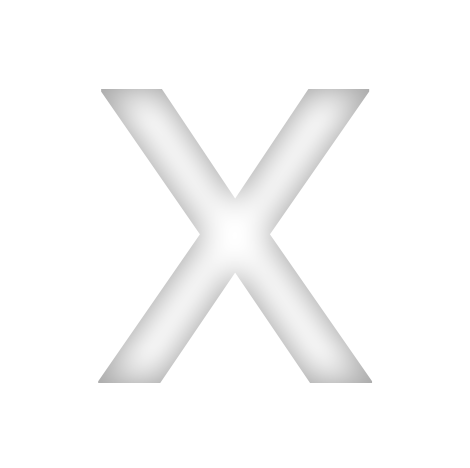
<style>
.page{position:relative;width:470px;height:468px;background:#ffffff}
.page>*{position:absolute;margin:0}
.t1{font:418.7px "NexaBold";color:#e4e4e4}
</style>
<div class="page">
<p class="t1" style="left:98px;top:89px;width:275px;height:294px">X</p>
</div>
